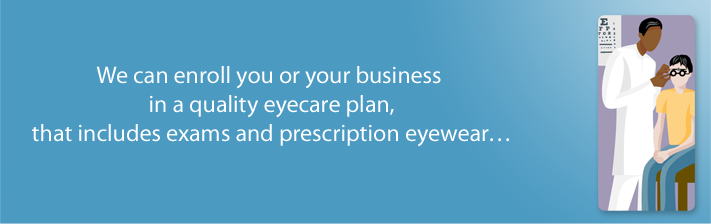
<style>
.page{position:relative;width:711px;height:224px;background:#4b9ac2}
.page>*{position:absolute;margin:0}
.t1{font:24px "MyriadPro-Regular";color:#ffffff}
</style>
<div class="page">
<p class="t1" style="left:32px;top:66px;width:477px;height:81px;text-align:center">We can enroll you or your business<br> in a quality eyecare plan,<br> that includes exams and prescription eyewear…</p>
</div>
